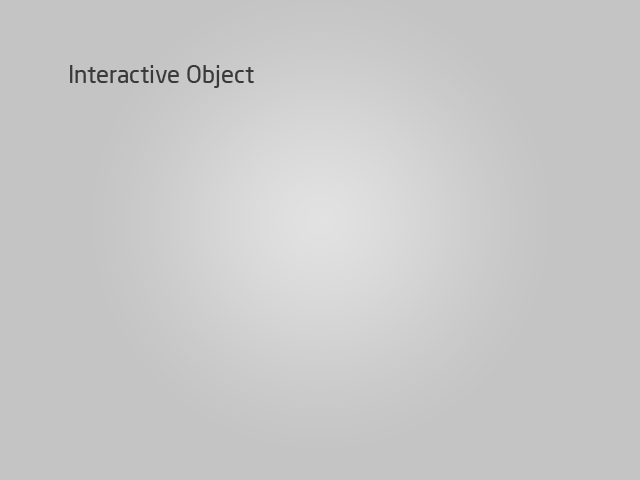
<style>
.page{position:relative;width:640px;height:480px;background:#c4c4c4}
.page>*{position:absolute;margin:0}
.t1{font:24px "NeoSans";color:#3a3a3a}
</style>
<div class="page">
<p class="t1" style="left:70px;top:65px;width:184px;height:23px">Interactive Object</p>
</div>
